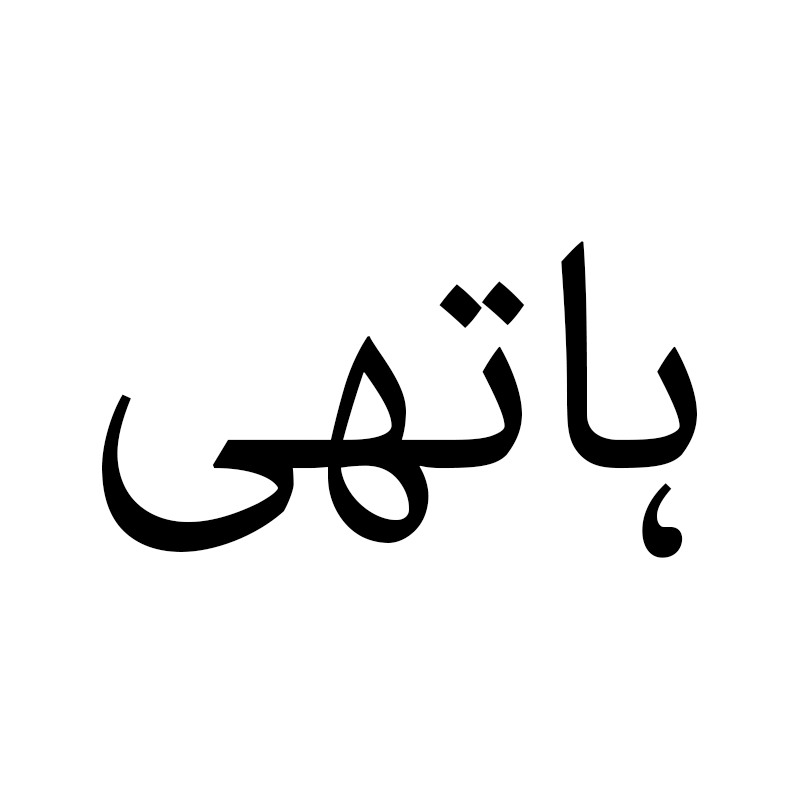
<style>
.page{position:relative;width:800px;height:800px;background:#ffffff}
.page>*{position:absolute;margin:0}
.t1{font:450px "AdobeArabic-Regular";color:#000000}
</style>
<div class="page">
<p class="t1" style="left:102px;top:241px;width:595px;height:317px">ہاتھی</p>
</div>
